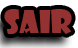
<style>
.page{position:relative;width:78px;height:48px;background:#943232}
.page>*{position:absolute;margin:0}
.t1{font:30.8px "ShowcardGothic-Reg";color:#943131}
</style>
<div class="page">
<p class="t1" style="left:4px;top:9px;width:68px;height:25px">Sair</p>
</div>
